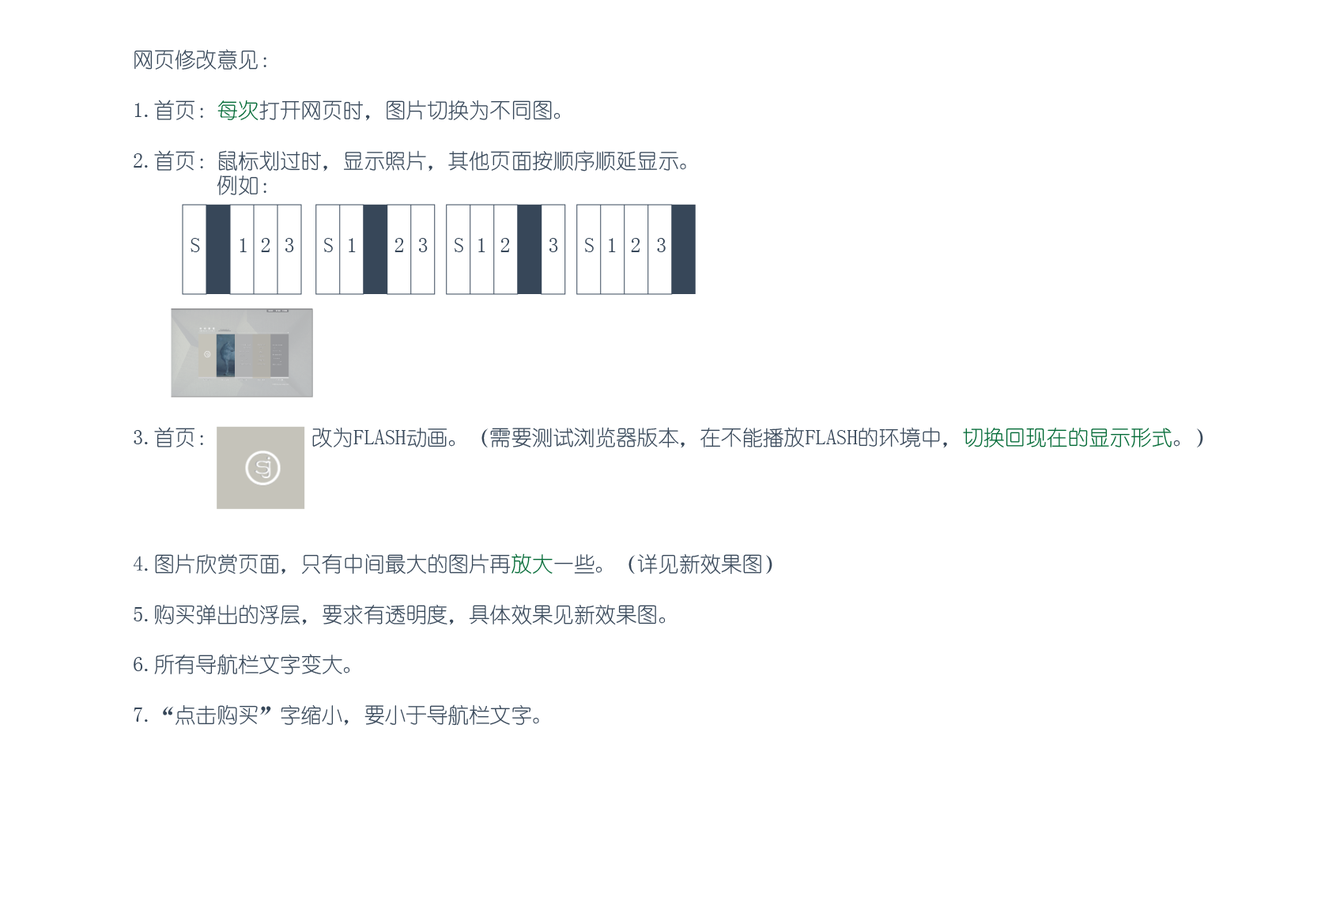
<style>
.page{position:relative;width:1321px;height:902px;background:#ffffff}
.page>*{position:absolute;margin:0}
.t1{font:21px "YouYuan";color:#374759}
.t2{font:21px "YouYuan";color:#006934}
</style>
<div class="page">
<p class="t1" style="left:134px;top:49px;width:552px;height:146px">网页修改意见：<br><br>1.首页：<span class="t2">每次</span>打开网页时，图片切换为不同图。<br><br>2.首页：鼠标划过时，显示照片，其他页面按顺序顺延显示。<br>        例如：</p>
<p class="t1" style="left:191px;top:238px;width:9px;height:14px">S</p>
<p class="t1" style="left:240px;top:238px;width:7px;height:14px">1</p>
<p class="t1" style="left:261px;top:238px;width:9px;height:14px">2</p>
<p class="t1" style="left:285px;top:238px;width:9px;height:14px">3</p>
<p class="t1" style="left:324px;top:238px;width:9px;height:14px">S</p>
<p class="t1" style="left:349px;top:238px;width:7px;height:14px">1</p>
<p class="t1" style="left:395px;top:238px;width:9px;height:14px">2</p>
<p class="t1" style="left:419px;top:238px;width:9px;height:14px">3</p>
<p class="t1" style="left:455px;top:238px;width:8px;height:14px">S</p>
<p class="t1" style="left:478px;top:238px;width:8px;height:14px">1</p>
<p class="t1" style="left:501px;top:238px;width:9px;height:14px">2</p>
<p class="t1" style="left:550px;top:238px;width:8px;height:14px">3</p>
<p class="t1" style="left:585px;top:238px;width:9px;height:14px">S</p>
<p class="t1" style="left:609px;top:238px;width:7px;height:14px">1</p>
<p class="t1" style="left:631px;top:238px;width:10px;height:14px">2</p>
<p class="t1" style="left:657px;top:238px;width:9px;height:14px">3</p>
<p class="t1" style="left:134px;top:427px;width:1070px;height:299px">3.首页：         改为FLASH动画。（需要测试浏览器版本，在不能播放FLASH的环境中，<span class="t2">切换回现在的显示形式</span>。）<br><br><br><br><br>4.图片欣赏页面，只有中间最大的图片再<span class="t2">放大</span>一些。（详见新效果图）<br><br>5.购买弹出的浮层，要求有透明度，具体效果见新效果图。<br><br>6.所有导航栏文字变大。<br><br>7.“点击购买”字缩小，要小于导航栏文字。</p>
</div>
